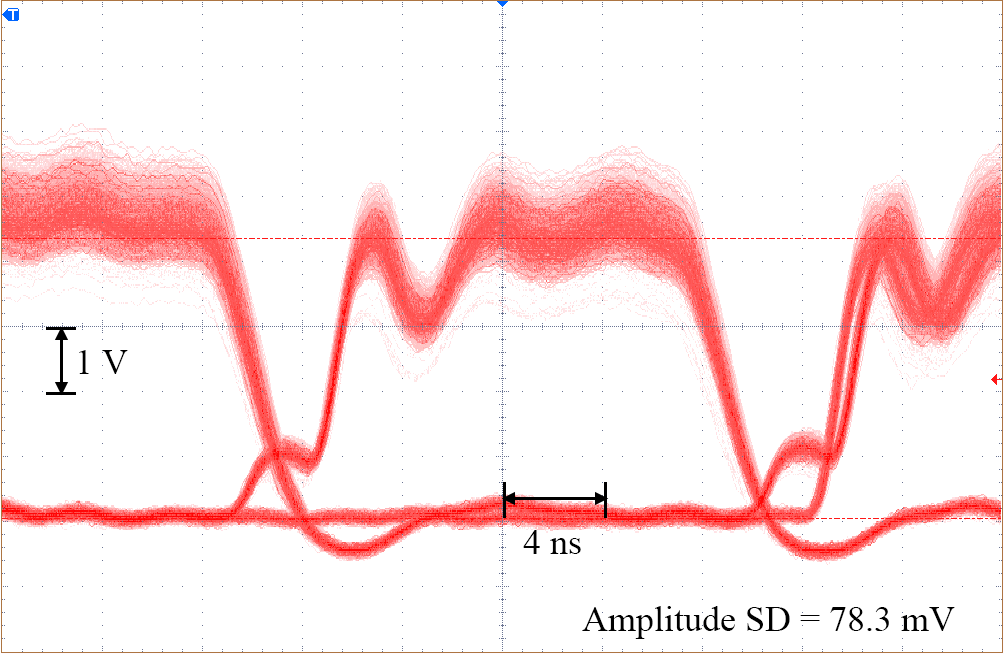
<style>
.page{position:relative;width:1005px;height:655px;background:#ffffff}
.page>*{position:absolute;margin:0}
.t1{font:36px "TimesNewRomanPSMT";color:#000000}
</style>
<div class="page">
<p class="t1" style="left:79px;top:350px;width:49px;height:24px">1 V</p>
<p class="t1" style="left:523px;top:530px;width:58px;height:24px">4 ns</p>
<p class="t1" style="left:582px;top:606px;width:373px;height:33px">Amplitude SD = 78.3 mV</p>
</div>
